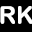
<style>
.page{position:relative;width:32px;height:32px;background:#000000}
.page>*{position:absolute;margin:0}
.t1{font:24px "ArialRoundedMTBold";color:#ffffff}
</style>
<div class="page">
<p class="t1" style="left:0px;top:6px;width:33px;height:18px">RK</p>
</div>
